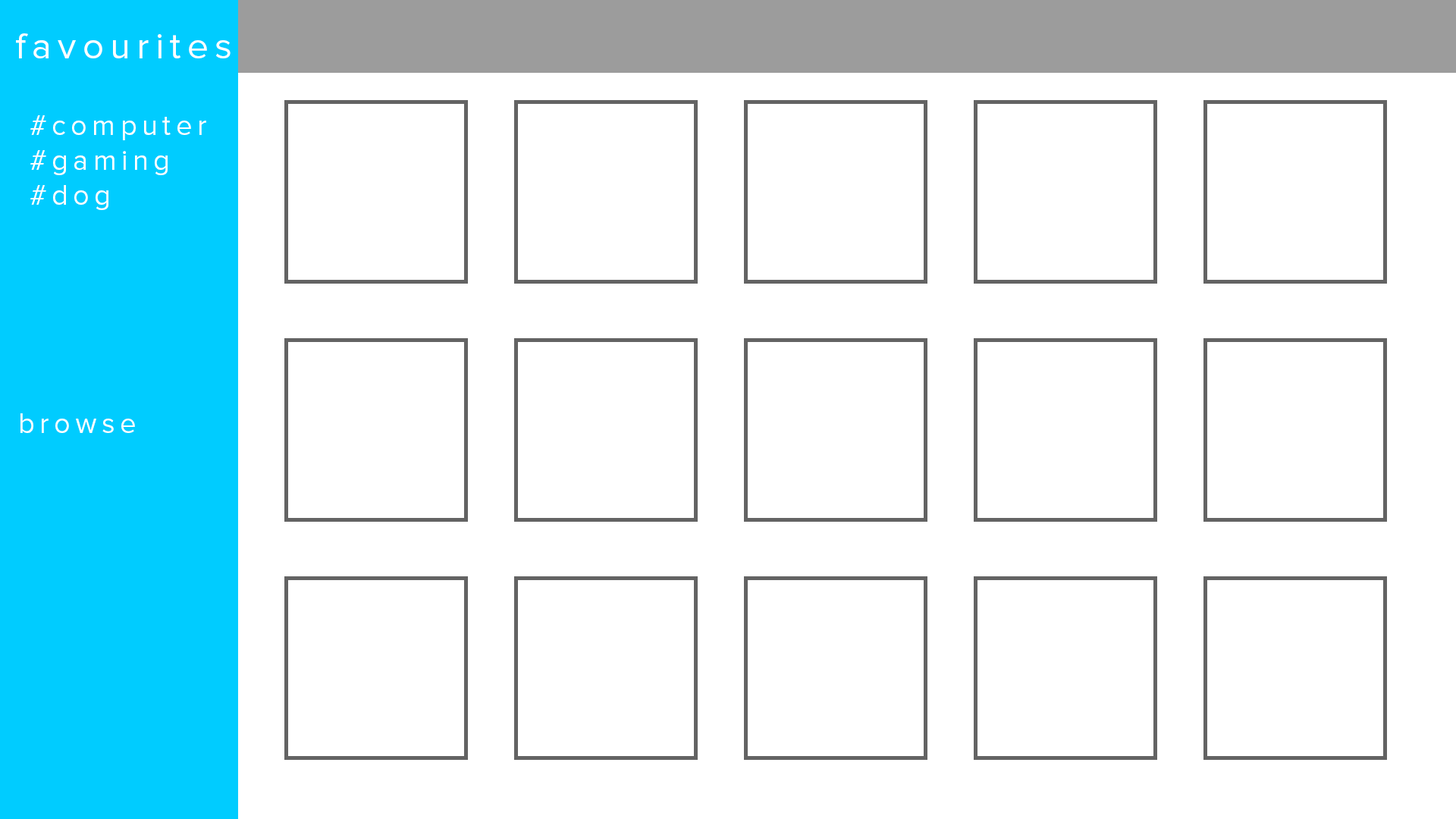
<style>
.page{position:relative;width:1456px;height:819px;background:#ffffff}
.page>*{position:absolute;margin:0}
.t1{font:37.2px "ProximaNova-Regular";letter-spacing:0.17em;color:#ffffff}
.t2{font:28.8px "ProximaNova-Regular";letter-spacing:0.17em;color:#ffffff}
</style>
<div class="page">
<p class="t1" style="left:16px;top:33px;width:215px;height:25px">favourites</p>
<p class="t2" style="left:30px;top:115px;width:176px;height:95px">#computer<br>#gaming<br>#dog</p>
<p class="t2" style="left:20px;top:413px;width:115px;height:20px">browse</p>
</div>
